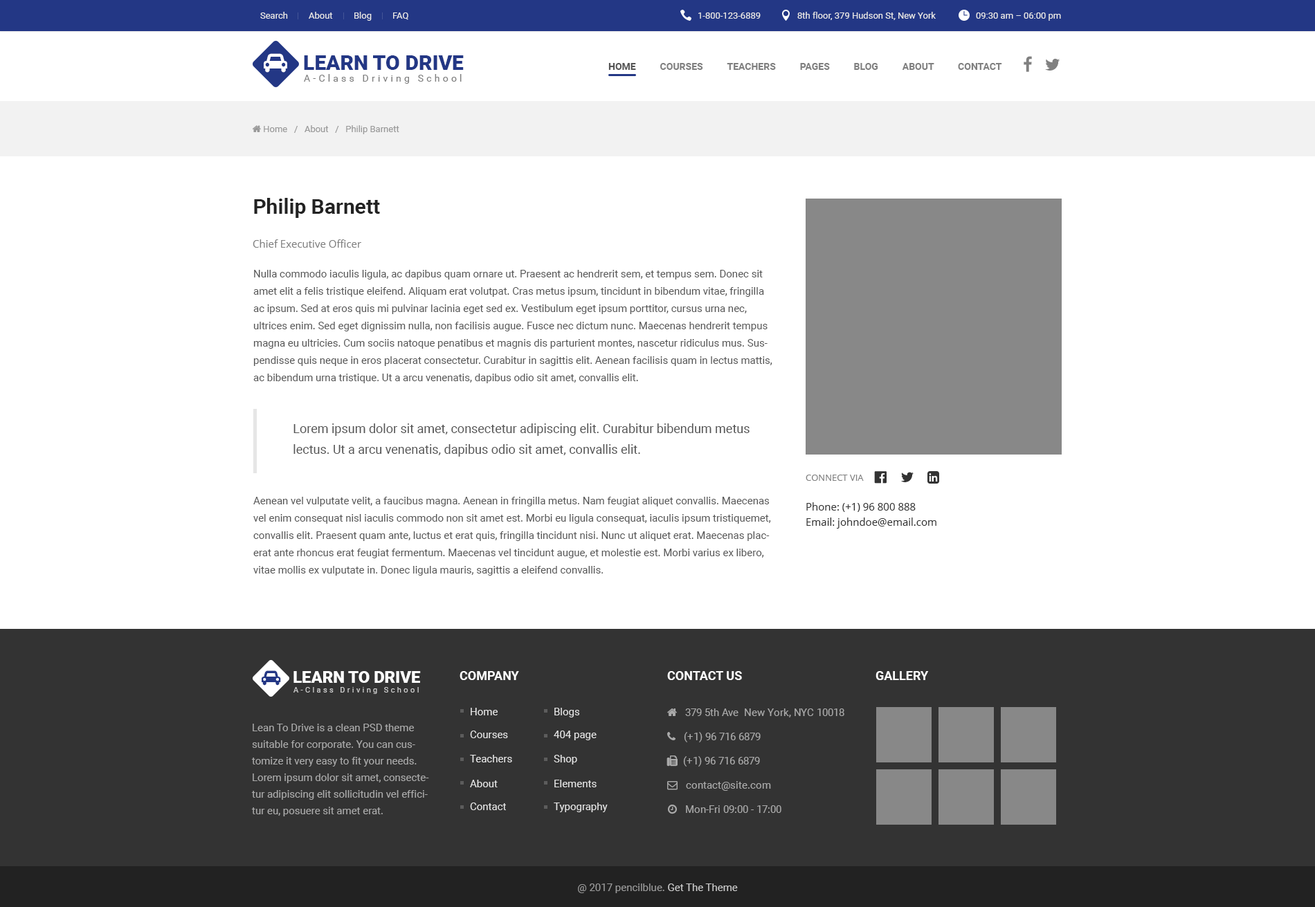
<style>
.page{position:relative;width:1315px;height:907px;background:#ffffff}
.page>*{position:absolute;margin:0}
.t1{font:9px "Roboto-Regular";color:#e6e6e6}
.t2{font:20.8px "Roboto-Black";color:#233785;text-transform:uppercase}
.t3{font:9.7px "Roboto-Bold";color:#808080;text-transform:uppercase}
.t4{font:9.7px "Roboto-Bold";color:#555555;text-transform:uppercase}
.t5{font:9.7px "Roboto-Regular";letter-spacing:0.3em;color:#808080}
.t6{font:20.8px "Roboto-Bold";color:#222222}
.t7{font:10.4px "OpenSans";color:#808080}
.t8{font:10.4px/17.3px "Roboto-Regular";color:#555555}
.t9{font:12.5px/20.8px "Roboto-Regular";color:#555555}
.t10{font:9px "OpenSans";color:#808080;text-transform:uppercase}
.t11{font:10.4px/15.2px "OpenSans";color:#333333}
.t12{font:16.5px "Roboto-Black";color:#ffffff;text-transform:uppercase}
.t13{font:12.5px "Roboto-Bold";color:#ffffff;text-transform:uppercase}
.t14{font:7.7px "Roboto-Regular";letter-spacing:0.3em;color:#cccccc}
.t15{font:10.4px "Roboto-Regular";color:#e6e6e6}
.t16{font:10.4px/16.6px "Roboto-Regular";color:#aaaaaa}
.t17{font:10.4px "Roboto-Regular";color:#999999}
.t18{font:10.4px "Roboto-Regular";color:#cccccc}
</style>
<div class="page">
<p class="t1" style="left:260px;top:12px;width:28px;height:7px">Search</p>
<p class="t1" style="left:309px;top:12px;width:24px;height:7px">About</p>
<p class="t1" style="left:354px;top:12px;width:18px;height:9px">Blog</p>
<p class="t1" style="left:393px;top:12px;width:15px;height:8px">FAQ</p>
<p class="t1" style="left:698px;top:12px;width:62px;height:7px">1-800-123-6889</p>
<p class="t1" style="left:797px;top:12px;width:138px;height:8px">8th floor, 379 Hudson St, New York</p>
<p class="t1" style="left:976px;top:12px;width:85px;height:9px">09:30 am – 06:00 pm</p>
<p class="t2" style="left:304px;top:55px;width:160px;height:15px">Learn to Drive</p>
<p class="t3" style="left:608px;top:63px;width:394px;height:7px"><span class="t4">Home          </span>Courses          Teachers          Pages          Blog          About          Contact</p>
<p class="t5" style="left:304px;top:74px;width:157px;height:10px">A-Class Driving School</p>
<p class="t6" style="left:254px;top:198px;width:126px;height:20px">Philip Barnett</p>
<p class="t7" style="left:253px;top:239px;width:108px;height:9px">Chief Executive Officer</p>
<p class="t8" style="left:253px;top:270px;width:519px;height:113px">Nulla commodo iaculis ligula, ac dapibus quam ornare ut. Praesent ac hendrerit sem, et tempus sem. Donec sit amet elit a felis tristique eleifend. Aliquam erat volutpat. Cras metus ipsum, tincidunt in bibendum vitae, fringilla ac ipsum. Sed at eros quis mi pulvinar lacinia eget sed ex. Vestibulum eget ipsum porttitor, cursus urna nec, ultrices enim. Sed eget dignissim nulla, non facilisis augue. Fusce nec dictum nunc. Maecenas hendrerit tempus magna eu ultricies. Cum sociis natoque penatibus et magnis dis parturient montes, nascetur ridiculus mus. Suspendisse quis neque in eros placerat consectetur. Curabitur in sagittis elit. Aenean facilisis quam in lectus mattis, ac bibendum urna tristique. Ut a arcu venenatis, dapibus odio sit amet, convallis elit.</p>
<p class="t9" style="left:293px;top:423px;width:456px;height:34px">Lorem ipsum dolor sit amet, consectetur adipiscing elit. Curabitur bibendum metus lectus. Ut a arcu venenatis, dapibus odio sit amet, convallis elit.</p>
<p class="t10" style="left:805px;top:475px;width:58px;height:6px">Connect via</p>
<p class="t8" style="left:253px;top:497px;width:518px;height:79px">Aenean vel vulputate velit, a faucibus magna. Aenean in fringilla metus. Nam feugiat aliquet convallis. Maecenas vel enim consequat nisl iaculis commodo non sit amet est. Morbi eu ligula consequat, iaculis ipsum tristiquemet, convallis elit. Praesent quam ante, luctus et erat quis, fringilla tincidunt nisi. Nunc ut aliquet erat. Maecenas placerat ante rhoncus erat feugiat fermentum. Maecenas vel tincidunt augue, et molestie est. Morbi varius ex libero, vitae mollis ex vulputate in. Donec ligula mauris, sagittis a eleifend convallis.</p>
<p class="t11" style="left:806px;top:502px;width:130px;height:27px">Phone: (+1) 96 800 888<br>Email: johndoe@email.com</p>
<p class="t12" style="left:293px;top:671px;width:128px;height:12px">Learn to Drive</p>
<p class="t13" style="left:459px;top:671px;width:60px;height:9px">Company</p>
<p class="t13" style="left:667px;top:671px;width:75px;height:9px">Contact us</p>
<p class="t13" style="left:875px;top:671px;width:54px;height:9px">Gallery</p>
<p class="t14" style="left:293px;top:687px;width:126px;height:7px">A-Class Driving School</p>
<p class="t15" style="left:470px;top:708px;width:27px;height:7px">Home</p>
<p class="t15" style="left:554px;top:708px;width:26px;height:9px">Blogs</p>
<p class="t16" style="left:251px;top:724px;width:178px;height:92px">Lean To Drive is a clean PSD theme suitable for corporate. You can customize it very easy to fit your needs. Lorem ipsum dolor sit amet, consectetur adipiscing elit sollicitudin vel efficitur eu, posuere sit amet erat.</p>
<p class="t15" style="left:470px;top:731px;width:38px;height:7px">Courses</p>
<p class="t15" style="left:554px;top:731px;width:42px;height:9px">404 page</p>
<p class="t15" style="left:470px;top:755px;width:42px;height:7px">Teachers</p>
<p class="t15" style="left:554px;top:755px;width:23px;height:10px">Shop</p>
<p class="t15" style="left:470px;top:780px;width:27px;height:7px">About</p>
<p class="t15" style="left:554px;top:780px;width:42px;height:7px">Elements</p>
<p class="t15" style="left:470px;top:803px;width:36px;height:7px">Contact</p>
<p class="t15" style="left:554px;top:803px;width:53px;height:9px">Typography</p>
<p class="t17" style="left:578px;top:884px;width:160px;height:9px">@ 2017 pencilblue. <span class="t18">Get The Theme</span></p>
</div>
